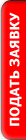
<style>
.page{position:relative;width:26px;height:140px;background:#ff0000}
.page>*{position:absolute;margin:0}
.t1{font:13px "Tahoma-Bold";letter-spacing:0.01em;color:#ffffff;font-variant:small-caps}
</style>
<div class="page">
<p class="t1" style="left:9px;top:12px;width:13px;height:114px;rotate:-90deg">ПОДАТЬ ЗАЯВКУ</p>
</div>
